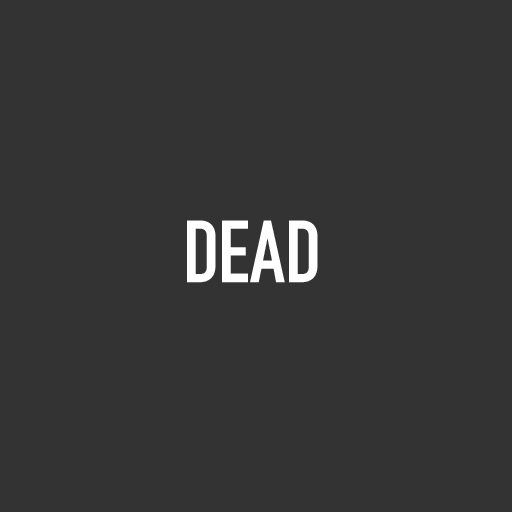
<style>
.page{position:relative;width:512px;height:512px;background:#333333}
.page>*{position:absolute;margin:0}
.t1{font:86px "DINEngschrift";color:#ffffff}
</style>
<div class="page">
<p class="t1" style="left:187px;top:220px;width:131px;height:63px">DEAD</p>
</div>
